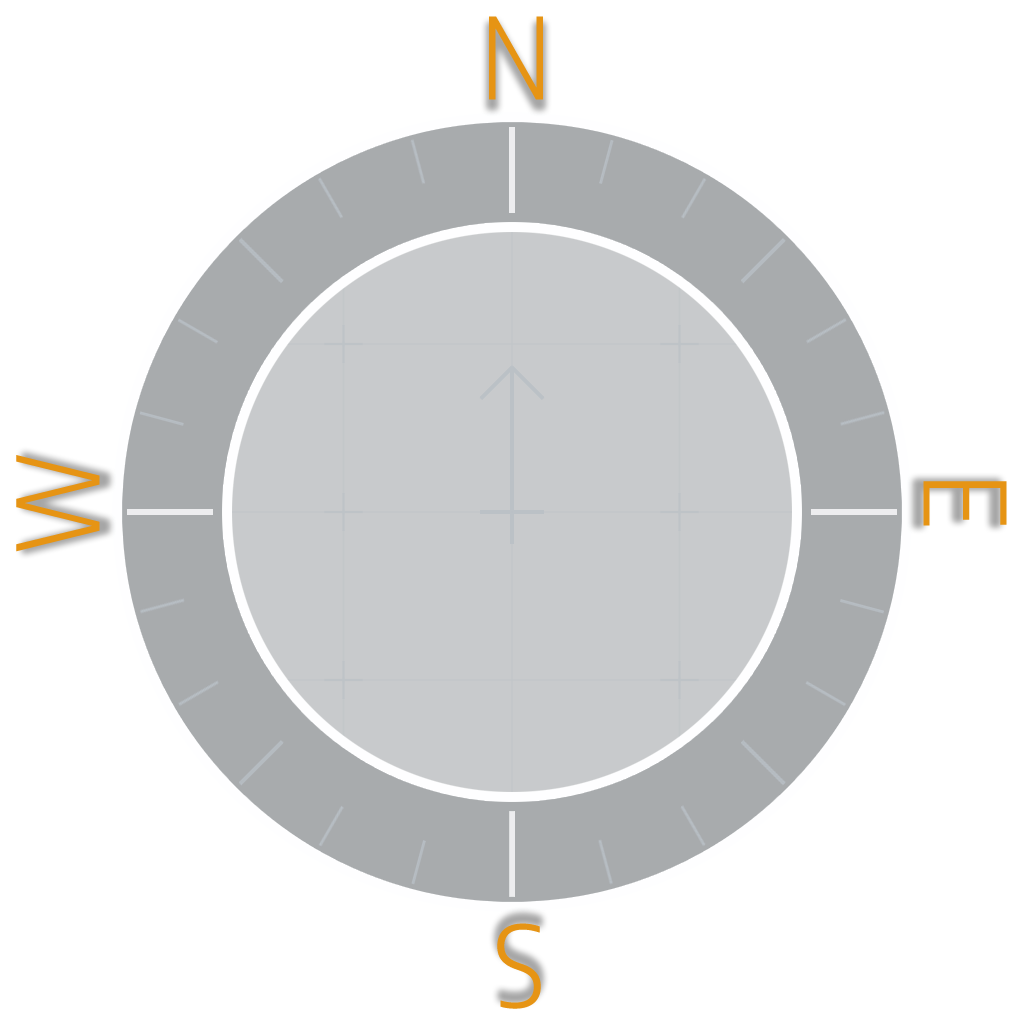
<style>
.page{position:relative;width:1024px;height:1024px;background:#ffffff}
.page>*{position:absolute;margin:0}
.t1{font:112px "EncodeSansCondensed-Light";color:#e69414;text-transform:uppercase;font-weight:bold}
</style>
<div class="page">
<p class="t1" style="left:489px;top:16px;width:54px;height:84px">N</p>
<p class="t1" style="left:16px;top:455px;width:84px;height:97px;rotate:-90deg">W</p>
<p class="t1" style="left:923px;top:481px;width:84px;height:45px;rotate:90deg">E</p>
<p class="t1" style="left:497px;top:923px;width:44px;height:86px;rotate:180deg">S</p>
</div>
